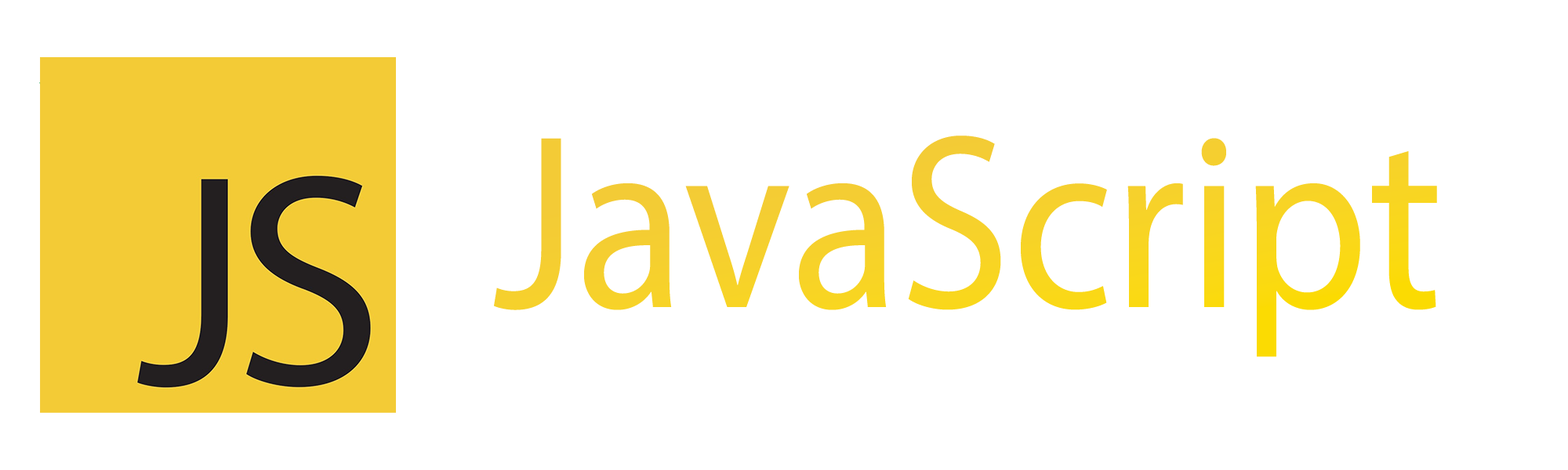
<style>
.page{position:relative;width:1568px;height:470px;background:#ffffff}
.page>*{position:absolute;margin:0}
.t1{font:250.4px "MyriadPro-Regular";color:#f7d229;scale:0.9 1}
</style>
<div class="page">
<p class="t1" style="left:494px;top:136px;width:943px;height:222px">JavaScript</p>
</div>
